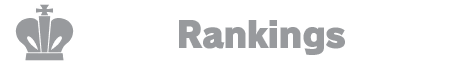
<style>
.page{position:relative;width:464px;height:66px;background:#ffffff}
.page>*{position:absolute;margin:0}
.t1{font:36px "RodinPro-UB";letter-spacing:-0.039em;color:#989a9d}
</style>
<div class="page">
<p class="t1" style="left:179px;top:20px;width:166px;height:35px">Rankings</p>
</div>
